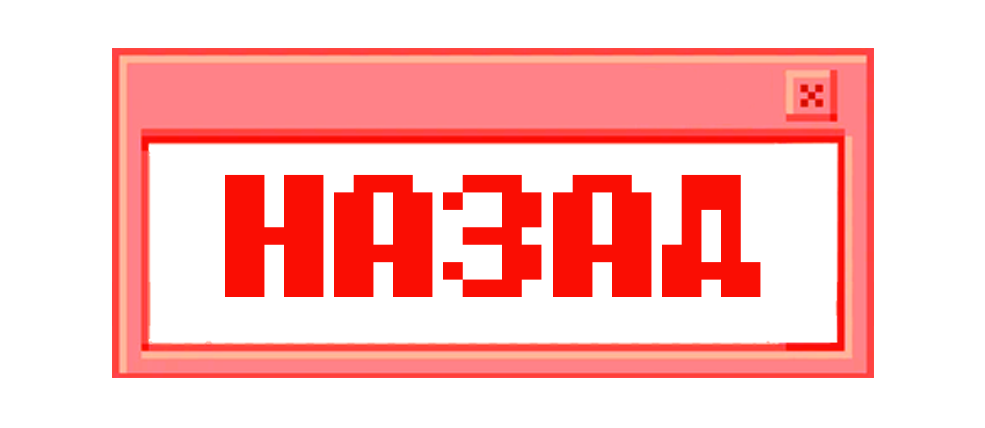
<style>
.page{position:relative;width:985px;height:428px;background:#ffffff}
.page>*{position:absolute;margin:0}
.t1{font:157px "Diary-of-an-8-bit-mage";letter-spacing:-0.05em;color:#fa0d03;scale:1.13 1}
</style>
<div class="page">
<p class="t1" style="left:225px;top:174px;width:536px;height:123px">НАЗАД</p>
</div>
